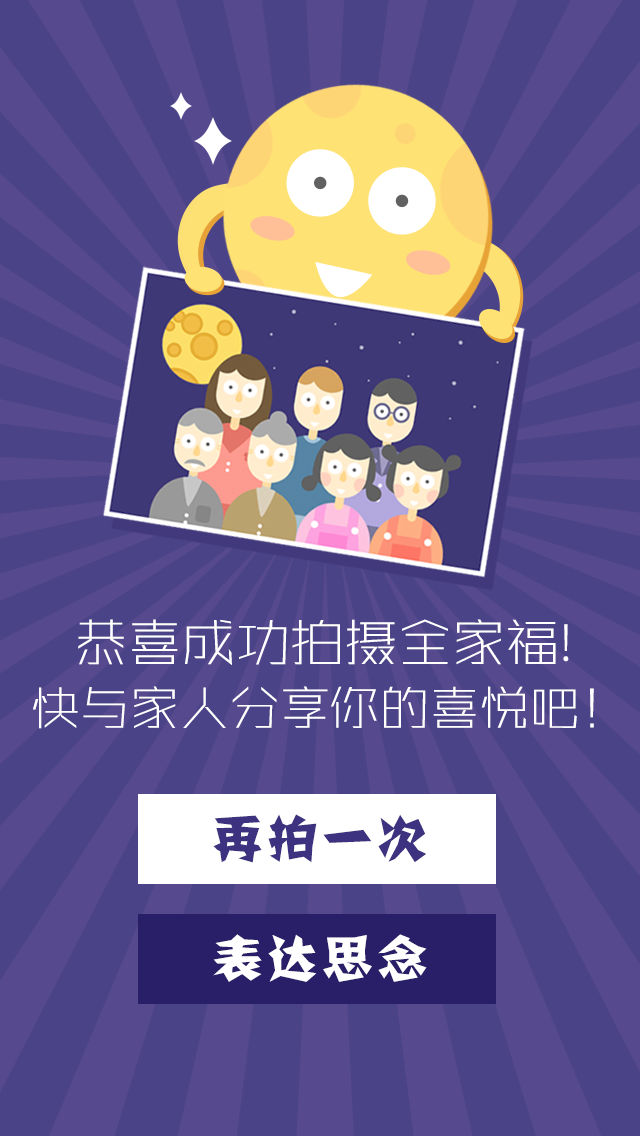
<style>
.page{position:relative;width:640px;height:1136px;background:#4b4387}
.page>*{position:absolute;margin:0}
.t1{font:50px/64px "RuiXian";color:#ffffff}
.t2{font:54px/64px "RuiXian";color:#ffffff}
.t3{font:50px "FZJZJW--GB1-0";letter-spacing:0.1em;color:#3c3280}
.t4{font:50px "FZJZJW--GB1-0";letter-spacing:0.1em;color:#ffffff}
</style>
<div class="page">
<p class="t1" style="left:33px;top:619px;width:561px;height:110px;text-align:center"><span class="t2">恭喜成功拍摄全家福!<br></span> 快与家人分享你的喜悦吧！</p>
<p class="t3" style="left:213px;top:814px;width:214px;height:49px">再拍一次</p>
<p class="t4" style="left:213px;top:934px;width:214px;height:48px">表达思念</p>
</div>
